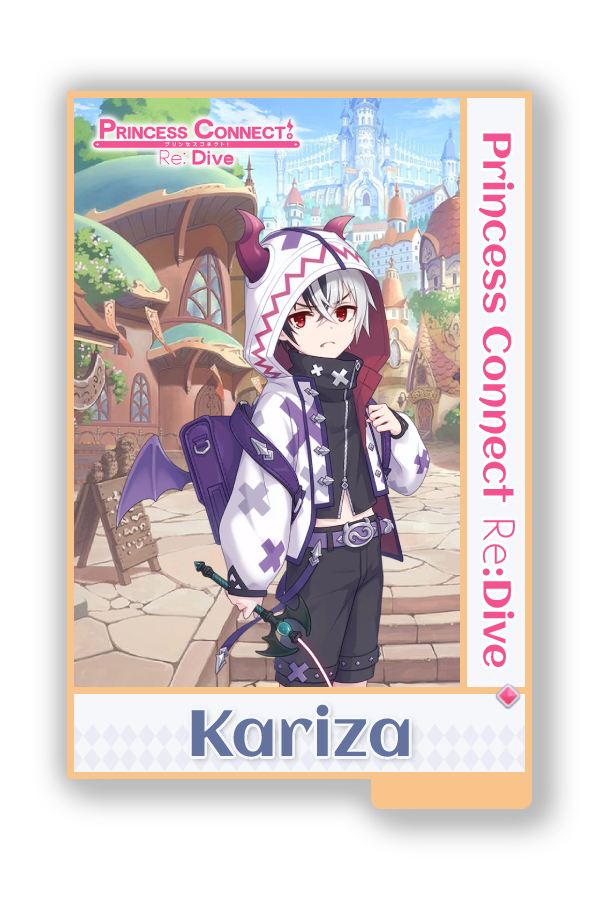
<style>
.page{position:relative;width:600px;height:900px;background:#ffffff}
.page>*{position:absolute;margin:0}
.t1{font:39px "Aclonica-Regular";color:#f55191}
.t2{font:39px "AaarghNormal";color:#f55191}
.t3{font:65px "Aclonica-Regular";color:#64739d}
</style>
<div class="page">
<p class="t1" style="left:478px;top:133px;width:38px;height:534px;rotate:90deg">Princess Connect <span class="t2">Re</span>:Dive</p>
<p class="t3" style="left:191px;top:704px;width:218px;height:53px">Kariza</p>
</div>
